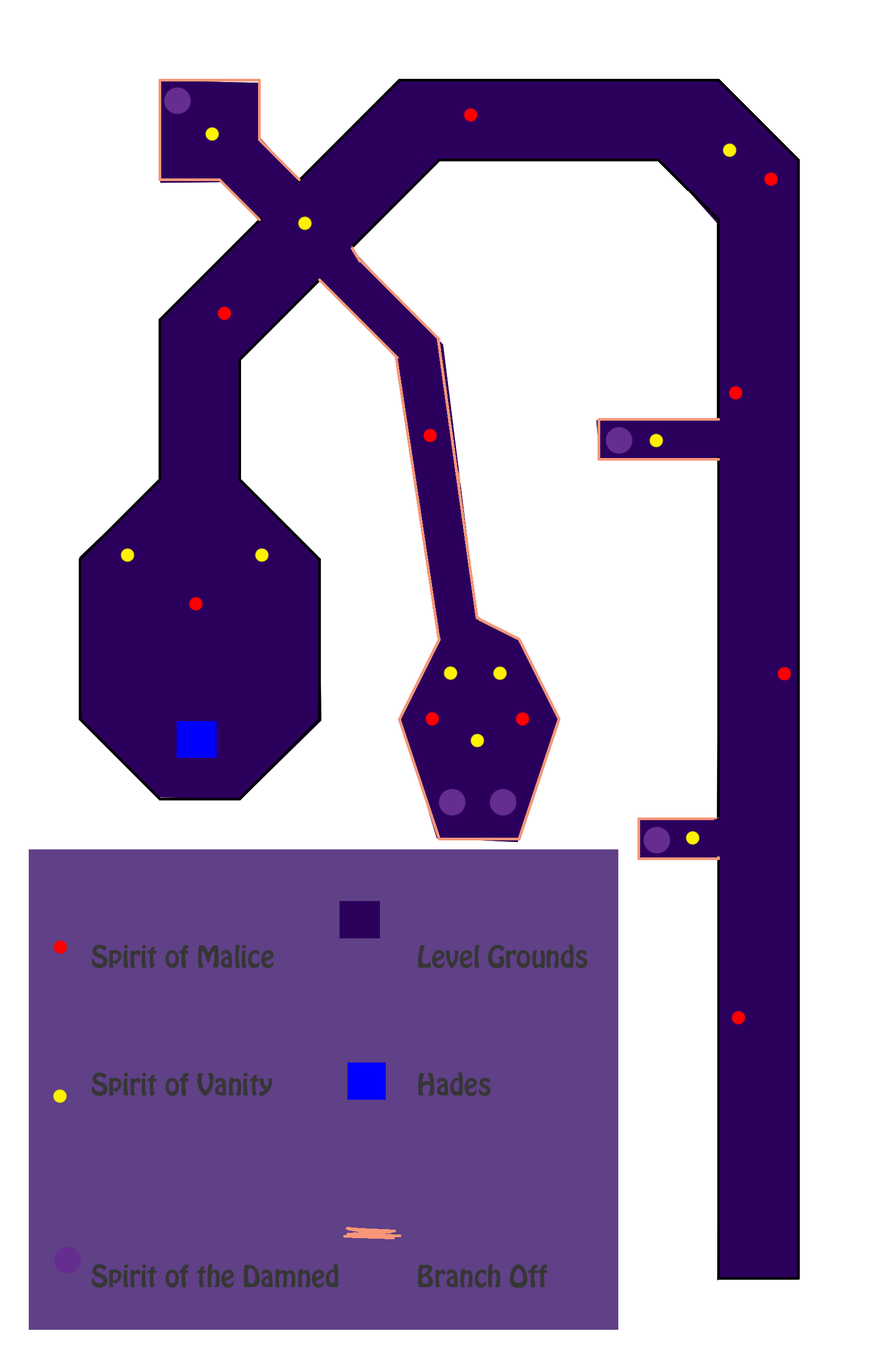
<style>
.page{position:relative;width:878px;height:1358px;background:#ffffff}
.page>*{position:absolute;margin:0}
.t1{font:26.6px "HoboStd";color:#363636}
</style>
<div class="page">
<p class="t1" style="left:92px;top:944px;width:496px;height:343px">Spirit of Malice        Level Grounds<br><br><br><br>  Spirit of Vanity        Hades<br><br><br><br><br><br>  Spirit of the Damned     Branch Off</p>
</div>
